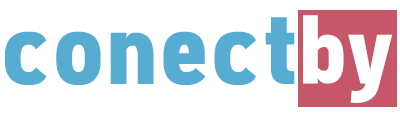
<style>
.page{position:relative;width:400px;height:115px;background:#ffffff}
.page>*{position:absolute;margin:0}
.t1{font:105px "FreeroadBold";color:#56acd1}
.t2{font:100px "FreeroadBold";color:#ffffff}
</style>
<div class="page">
<p class="t1" style="left:5px;top:17px;width:290px;height:68px">conect</p>
<p class="t2" style="left:303px;top:15px;width:90px;height:88px">by</p>
</div>
